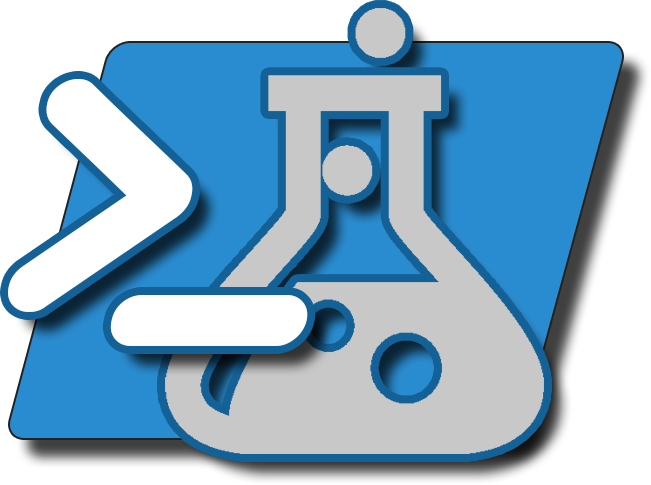
<style>
.page{position:relative;width:651px;height:485px;background:#ffffff}
.page>*{position:absolute;margin:0}
.t1{font:443.1px "VDS-BoldItalic";color:#ffffff}
</style>
<div class="page">
<p class="t1" style="left:8px;top:79px;width:185px;height:233px">&gt;</p>
<p class="t1" style="left:110px;top:295px;width:198px;height:51px">_</p>
</div>
